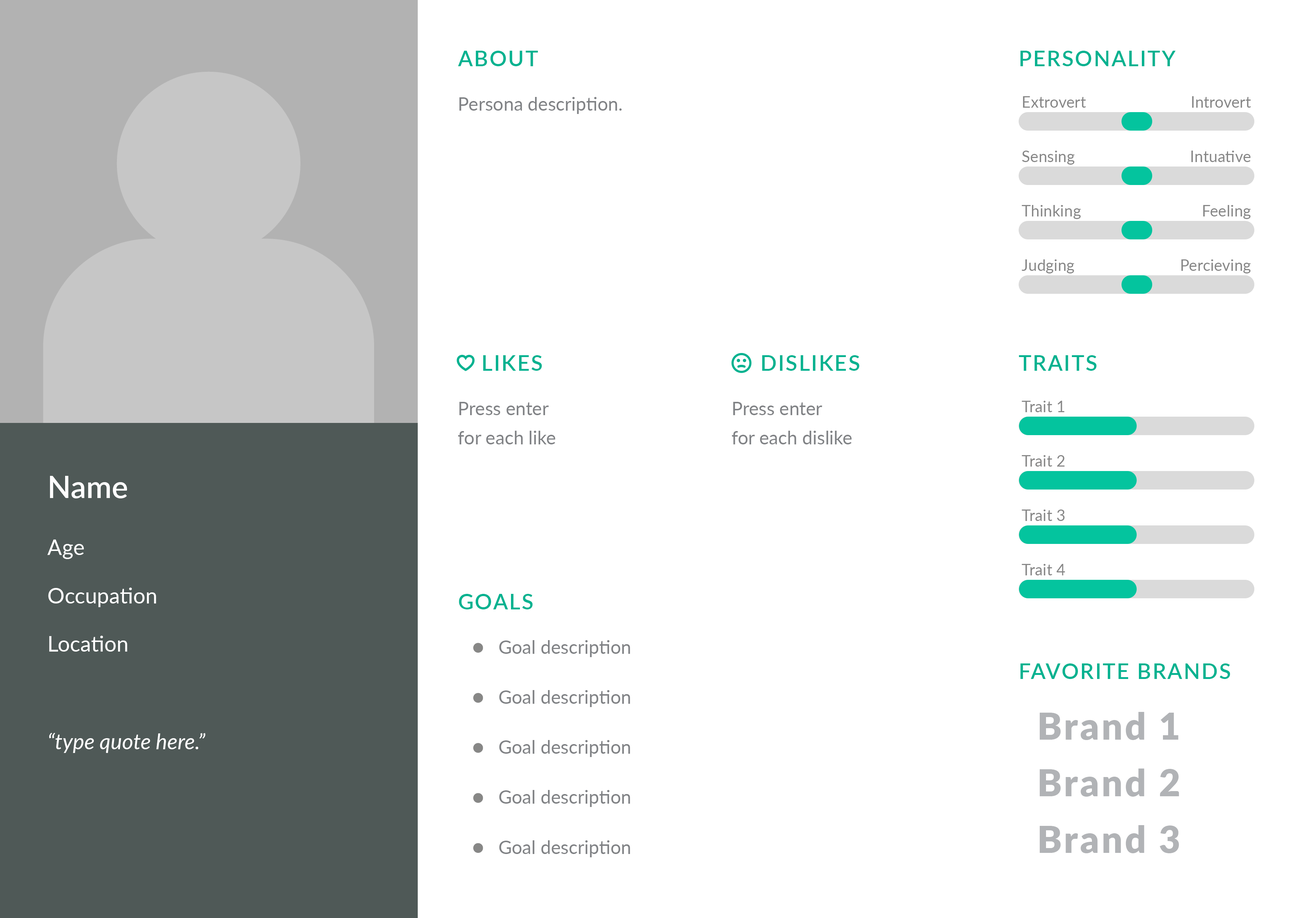
<style>
.page{position:relative;width:1298px;height:918px;background:#ffffff}
.page>*{position:absolute;margin:0}
.t1{font:21.6px "Lato-Semibold";letter-spacing:0.06em;color:#04b290}
.t2{font:18.5px "Lato-Regular";color:#808285}
.t3{font:15.4px "Lato-Regular";letter-spacing:0.01em;color:#878787}
.t4{font:18.5px/29.3px "Lato-Regular";color:#808285}
.t5{font:30.8px "Lato-Semibold";color:#ffffff}
.t6{font:21.6px "Lato-Regular";color:#ffffff}
.t7{font:37px "Lato-Black";letter-spacing:0.06em;color:#b1b3b6}
.t8{font:21.6px "Lato-Italic";color:#ffffff}
</style>
<div class="page">
<p class="t1" style="left:458px;top:51px;width:80px;height:15px">ABOUT</p>
<p class="t1" style="left:1021px;top:51px;width:155px;height:15px">PERSONALITY</p>
<p class="t2" style="left:459px;top:97px;width:163px;height:17px">Persona description.</p>
<p class="t3" style="left:1023px;top:96px;width:63px;height:12px">Extrovert</p>
<p class="t3" style="left:1192px;top:96px;width:59px;height:12px">Introvert</p>
<p class="t3" style="left:1022px;top:151px;width:53px;height:14px">Sensing</p>
<p class="t3" style="left:1192px;top:151px;width:59px;height:11px">Intuative</p>
<p class="t3" style="left:1022px;top:205px;width:59px;height:14px">Thinking</p>
<p class="t3" style="left:1203px;top:205px;width:48px;height:14px">Feeling</p>
<p class="t3" style="left:1022px;top:259px;width:53px;height:15px">Judging</p>
<p class="t3" style="left:1182px;top:259px;width:69px;height:15px">Percieving</p>
<p class="t1" style="left:483px;top:355px;width:59px;height:16px">LIKES</p>
<p class="t1" style="left:763px;top:355px;width:97px;height:16px">DISLIKES</p>
<p class="t1" style="left:1019px;top:355px;width:78px;height:16px">TRAITS</p>
<p class="t4" style="left:458px;top:402px;width:98px;height:43px">Press enter<br>for each like</p>
<p class="t4" style="left:732px;top:402px;width:120px;height:43px">Press enter<br>for each dislike</p>
<p class="t3" style="left:1022px;top:401px;width:43px;height:11px">Trait 1</p>
<p class="t3" style="left:1022px;top:455px;width:43px;height:12px">Trait 2</p>
<p class="t5" style="left:50px;top:476px;width:77px;height:23px">Name</p>
<p class="t3" style="left:1022px;top:510px;width:43px;height:11px">Trait 3</p>
<p class="t6" style="left:47px;top:540px;width:37px;height:19px">Age</p>
<p class="t3" style="left:1022px;top:564px;width:44px;height:12px">Trait 4</p>
<p class="t6" style="left:48px;top:588px;width:108px;height:19px">Occupation</p>
<p class="t1" style="left:459px;top:594px;width:74px;height:16px">GOALS</p>
<p class="t6" style="left:49px;top:636px;width:78px;height:16px">Location</p>
<p class="t2" style="left:499px;top:640px;width:131px;height:17px">Goal description</p>
<p class="t1" style="left:1021px;top:664px;width:210px;height:15px">FAVORITE BRANDS</p>
<p class="t2" style="left:499px;top:690px;width:131px;height:17px">Goal description</p>
<p class="t7" style="left:1040px;top:712px;width:139px;height:28px">Brand 1</p>
<p class="t8" style="left:49px;top:733px;width:156px;height:20px">“type quote here.”</p>
<p class="t2" style="left:499px;top:740px;width:131px;height:17px">Goal description</p>
<p class="t7" style="left:1040px;top:769px;width:140px;height:28px">Brand 2</p>
<p class="t2" style="left:499px;top:790px;width:131px;height:17px">Goal description</p>
<p class="t7" style="left:1040px;top:825px;width:140px;height:29px">Brand 3</p>
<p class="t2" style="left:499px;top:841px;width:131px;height:17px">Goal description</p>
</div>
